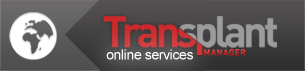
<style>
.page{position:relative;width:305px;height:71px}
.page>*{position:absolute;margin:0}
.t1{font:13.8px "ArialMT";letter-spacing:-0.02em;color:#ffffff}
.t2{font:8.8px "DIN-Bold";letter-spacing:0.023em}
</style>
<div class="page">
<p class="t1" style="left:106px;top:49px;width:87px;height:11px">online services</p>
<p class="t2" style="left:204px;top:49px;width:42px;height:7px">MANAGER</p>
</div>
